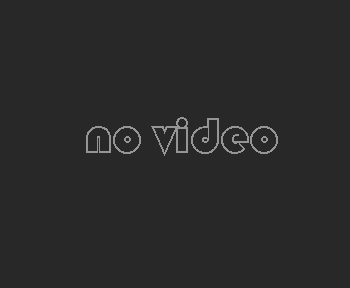
<style>
.page{position:relative;width:350px;height:288px;background:#282828}
.page>*{position:absolute;margin:0}
.t1{font:50px "STCaiyun";letter-spacing:0.02em;color:#959595}
</style>
<div class="page">
<p class="t1" style="left:86px;top:117px;width:192px;height:39px">no video</p>
</div>
